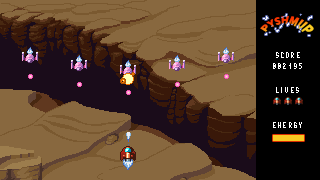
<style>
.page{position:relative;width:320px;height:180px;background:#88683f}
.page>*{position:absolute;margin:0}
.t1{font:8.8px "NewakeDemo";letter-spacing:0.1em;scale:0.93 1}
.t2{font:9.8px "PixelOperator";letter-spacing:0.1em;color:#ffffff}
</style>
<div class="page">
<p class="t1" style="left:260px;top:16px;width:54px;height:16px;rotate:4deg">PYSHMUP</p>
<p class="t2" style="left:273px;top:52px;width:29px;height:76px;text-align:center">SCORE<br><br><br>LIVES<br><br><br>ENERGY</p>
<p class="t2" style="left:273px;top:63px;width:29px;height:6px">002195</p>
</div>
